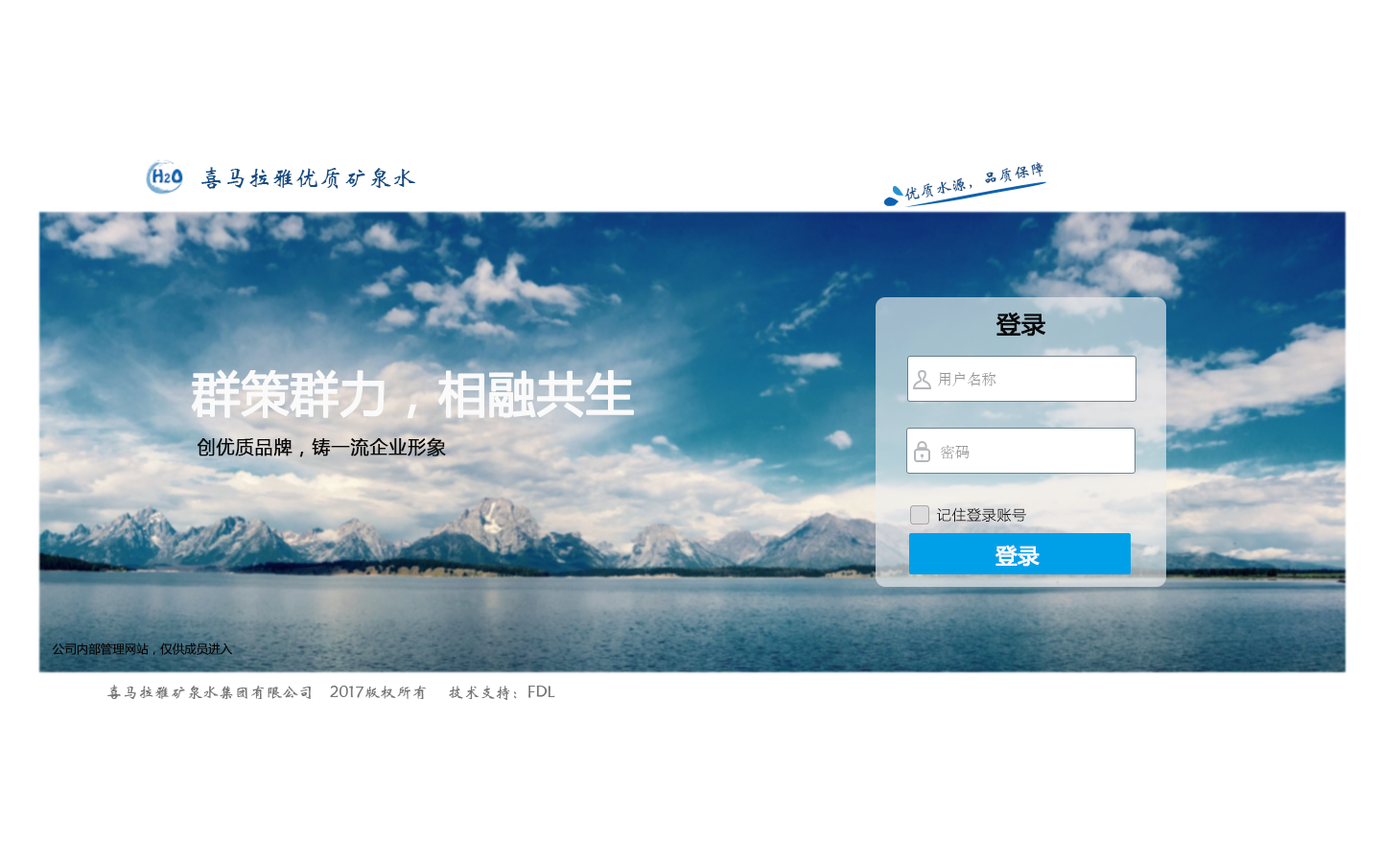
<style>
.page{position:relative;width:1381px;height:863px;background:#ffffff}
.page>*{position:absolute;margin:0}
.t1{font:24px "STXinwei";color:#114d85}
.t2{font:16px "STXinwei";color:#114d85}
.t3{font:24px "MicrosoftYaHei";color:#090909;font-weight:bold}
.t4{font:48px "MicrosoftYaHei";color:#fafafa;font-weight:bold}
.t5{font:14.7px "STSong";color:#959697}
.t6{font:18.7px "MicrosoftYaHei";color:#090909;font-weight:bold}
.t7{font:14.7px "FZLTCXHJW--GB1-0";color:#191919;font-weight:bold}
.t8{font:21.3px "MicrosoftYaHei";color:#f7f8fa;font-weight:bold}
.t9{font:12px "MicrosoftYaHei";color:#090909}
.t10{font:11.5px "STXinwei";color:#767778}
</style>
<div class="page">
<p class="t1" style="left:201px;top:167px;width:214px;height:22px">喜马拉雅优质矿泉水</p>
<p class="t2" style="left:905px;top:162px;width:139px;height:38px;rotate:-11deg">优质水源，品质保障</p>
<p class="t3" style="left:997px;top:312px;width:49px;height:25px">登录</p>
<p class="t4" style="left:191px;top:369px;width:443px;height:50px">群策群力，相融共生</p>
<p class="t5" style="left:938px;top:372px;width:59px;height:15px">用户名称</p>
<p class="t6" style="left:197px;top:437px;width:249px;height:21px">创优质品牌，铸一流企业形象</p>
<p class="t5" style="left:941px;top:445px;width:29px;height:14px">密码</p>
<p class="t7" style="left:937px;top:507px;width:89px;height:16px">记住登录账号</p>
<p class="t8" style="left:996px;top:545px;width:44px;height:22px">登录</p>
<p class="t9" style="left:52px;top:643px;width:181px;height:12px">公司内部管理网站，仅供成员进入</p>
<p class="t10" style="left:107px;top:685px;width:448px;height:15px">喜马拉雅矿泉水集团有限公司 © 2017版权所有     技术支持：FDL</p>
</div>
